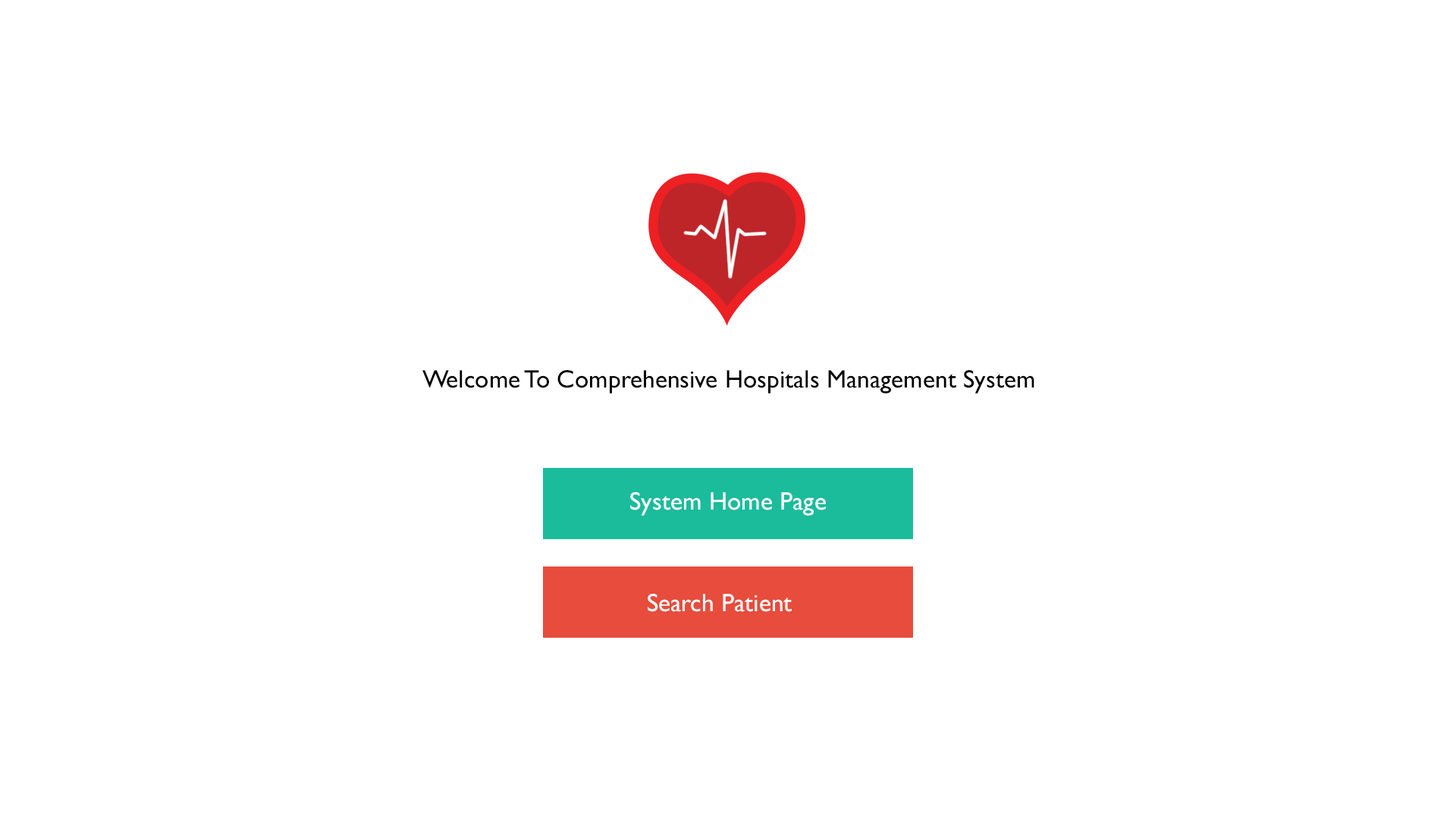
<style>
.page{position:relative;width:1456px;height:819px;background:#ffffff}
.page>*{position:absolute;margin:0}
.t1{font:25.3px "GillSansMT";color:#000000}
.t2{font:25.3px "GillSansMT";color:#ffffff}
</style>
<div class="page">
<p class="t1" style="left:422px;top:370px;width:612px;height:24px">Welcome To Comprehensive Hospitals Management System</p>
<p class="t2" style="left:630px;top:492px;width:196px;height:24px">System Home Page</p>
<p class="t2" style="left:648px;top:594px;width:144px;height:18px">Search Patient</p>
</div>
